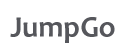
<style>
.page{position:relative;width:124px;height:55px;background:#ffffff}
.page>*{position:absolute;margin:0}
.t1{font:30px "Candara-Bold";color:#56575c}
</style>
<div class="page">
<p class="t1" style="left:10px;top:17px;width:105px;height:26px">JumpGo</p>
</div>
